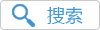
<style>
.page{position:relative;width:100px;height:30px;background:#ffffff}
.page>*{position:absolute;margin:0}
.t1{font:18px "MicrosoftYaHei";color:#3998d6}
</style>
<div class="page">
<p class="t1" style="left:47px;top:7px;width:36px;height:18px">搜索</p>
</div>
